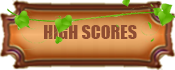
<style>
.page{position:relative;width:175px;height:70px}
.page>*{position:absolute;margin:0}
.t1{font:18px "Impact";color:#8f4d32}
</style>
<div class="page">
<p class="t1" style="left:44px;top:25px;width:93px;height:14px">HIGH SCORES</p>
</div>
